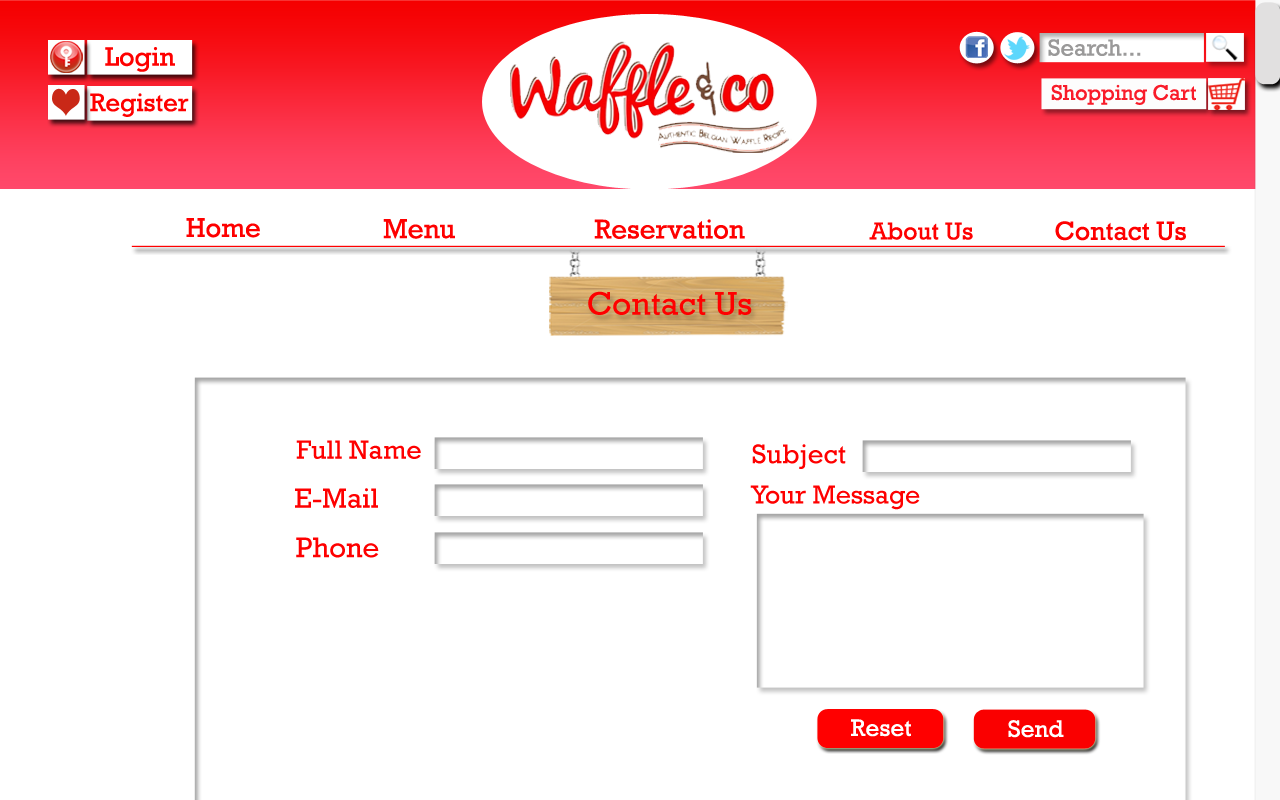
<style>
.page{position:relative;width:1280px;height:800px;background:#ffffff}
.page>*{position:absolute;margin:0}
.t1{font:27.5px "Rockwell";color:#fe0000}
.t2{font:28px "Rockwell";color:#fe0000}
.t3{font:27.6px "Rockwell";color:#fe0000}
.t4{font:24.9px "Rockwell";color:#fe0000}
.t5{font:26.7px "Rockwell";color:#fe0000}
.t6{font:33.5px "Rockwell";color:#fe0000}
.t7{font:27.1px "Rockwell";color:#fe0000}
.t8{font:26.4px "Rockwell";color:#fe0000}
.t9{font:28.5px "Rockwell";color:#fe0000}
.t10{font:29.1px "Rockwell";color:#fe0000}
.t11{font:24.2px "Rockwell";color:#ffffff}
</style>
<div class="page">
<p class="t1" style="left:186px;top:218px;width:74px;height:20px">Home</p>
<p class="t2" style="left:383px;top:219px;width:72px;height:20px">Menu</p>
<p class="t3" style="left:594px;top:219px;width:151px;height:20px">Reservation</p>
<p class="t4" style="left:869px;top:222px;width:104px;height:18px">About Us</p>
<p class="t5" style="left:1055px;top:221px;width:131px;height:20px">Contact Us</p>
<p class="t6" style="left:588px;top:291px;width:164px;height:24px">Contact Us</p>
<p class="t7" style="left:296px;top:440px;width:125px;height:19px">Full Name</p>
<p class="t1" style="left:752px;top:444px;width:94px;height:25px">Subject</p>
<p class="t8" style="left:750px;top:485px;width:170px;height:25px">Your Message</p>
<p class="t9" style="left:295px;top:488px;width:83px;height:20px">E-Mail</p>
<p class="t10" style="left:296px;top:537px;width:83px;height:21px">Phone</p>
<p class="t11" style="left:851px;top:719px;width:60px;height:18px">Reset</p>
<p class="t11" style="left:1008px;top:720px;width:56px;height:18px">Send</p>
</div>
